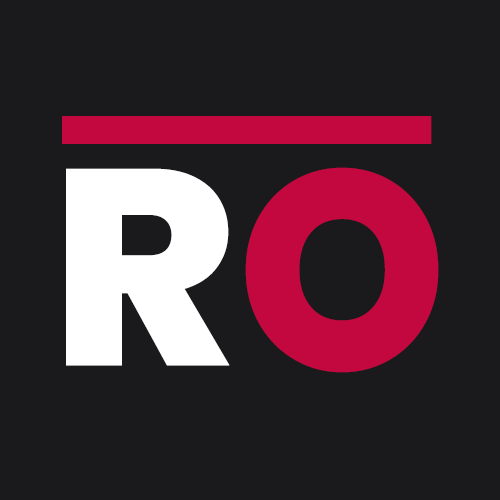
<style>
.page{position:relative;width:500px;height:500px;background:#1a1a1d}
.page>*{position:absolute;margin:0}
.t1{font:278.5px "Poppins-ExtraBold";letter-spacing:0.182em;color:#ffffff;font-weight:bold}
.t2{font:282.2px "Poppins-ExtraBold";letter-spacing:0.182em;color:#c3073f;font-weight:bold;scale:0.94 1}
</style>
<div class="page">
<p class="t1" style="left:66px;top:168px;width:164px;height:198px">R</p>
<p class="t2" style="left:245px;top:167px;width:194px;height:206px">O</p>
</div>
